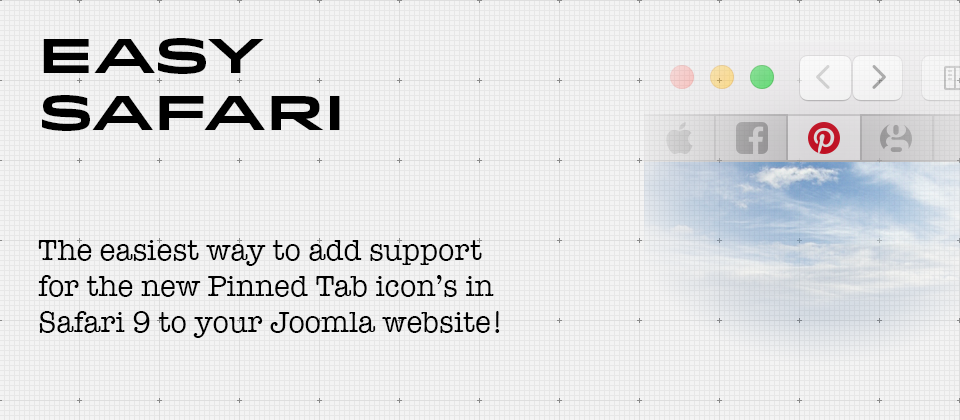
<style>
.page{position:relative;width:960px;height:420px;background:#f3f3f3}
.page>*{position:absolute;margin:0}
.t1{font:48px "Idlewild-Bold";color:#000000}
.t2{font:30px "AmericanTypewriter";color:#000000}
</style>
<div class="page">
<p class="t1" style="left:42px;top:38px;width:298px;height:93px">Easy<br>Safari</p>
<p class="t2" style="left:38px;top:240px;width:462px;height:98px">The easiest way to add support for the new Pinned Tab icon’s in Safari 9 to your Joomla website!</p>
</div>
